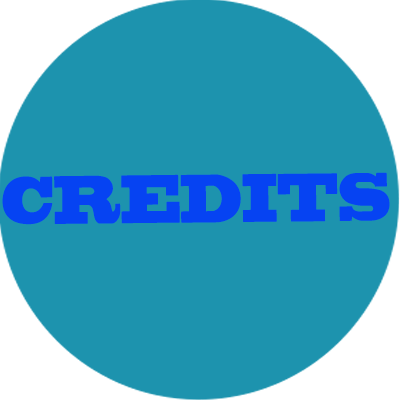
<style>
.page{position:relative;width:400px;height:400px;background:#1d93ae}
.page>*{position:absolute;margin:0}
.t1{font:63.7px "BlackoakStd";color:#0643f2;scale:0.52 1}
</style>
<div class="page">
<p class="t1" style="left:2px;top:172px;width:388px;height:53px;rotate:-1deg">CREDITS</p>
</div>
